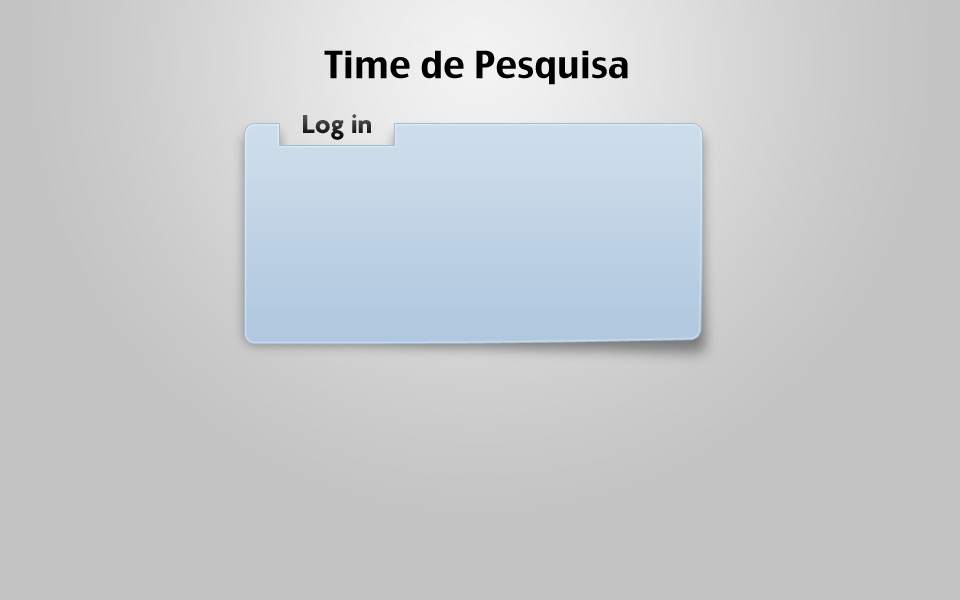
<style>
.page{position:relative;width:960px;height:600px;background:#c4c4c4}
.page>*{position:absolute;margin:0}
.t1{font:36px "CharcoalCY";color:#000000}
</style>
<div class="page">
<p class="t1" style="left:324px;top:50px;width:304px;height:35px">Time de Pesquisa</p>
</div>
